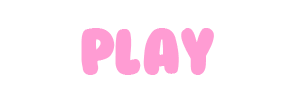
<style>
.page{position:relative;width:300px;height:100px;background:#ffffff}
.page>*{position:absolute;margin:0}
.t1{font:60px "BubbleGum";color:#ff9cd3}
</style>
<div class="page">
<p class="t1" style="left:81px;top:28px;width:133px;height:47px">Play</p>
</div>
